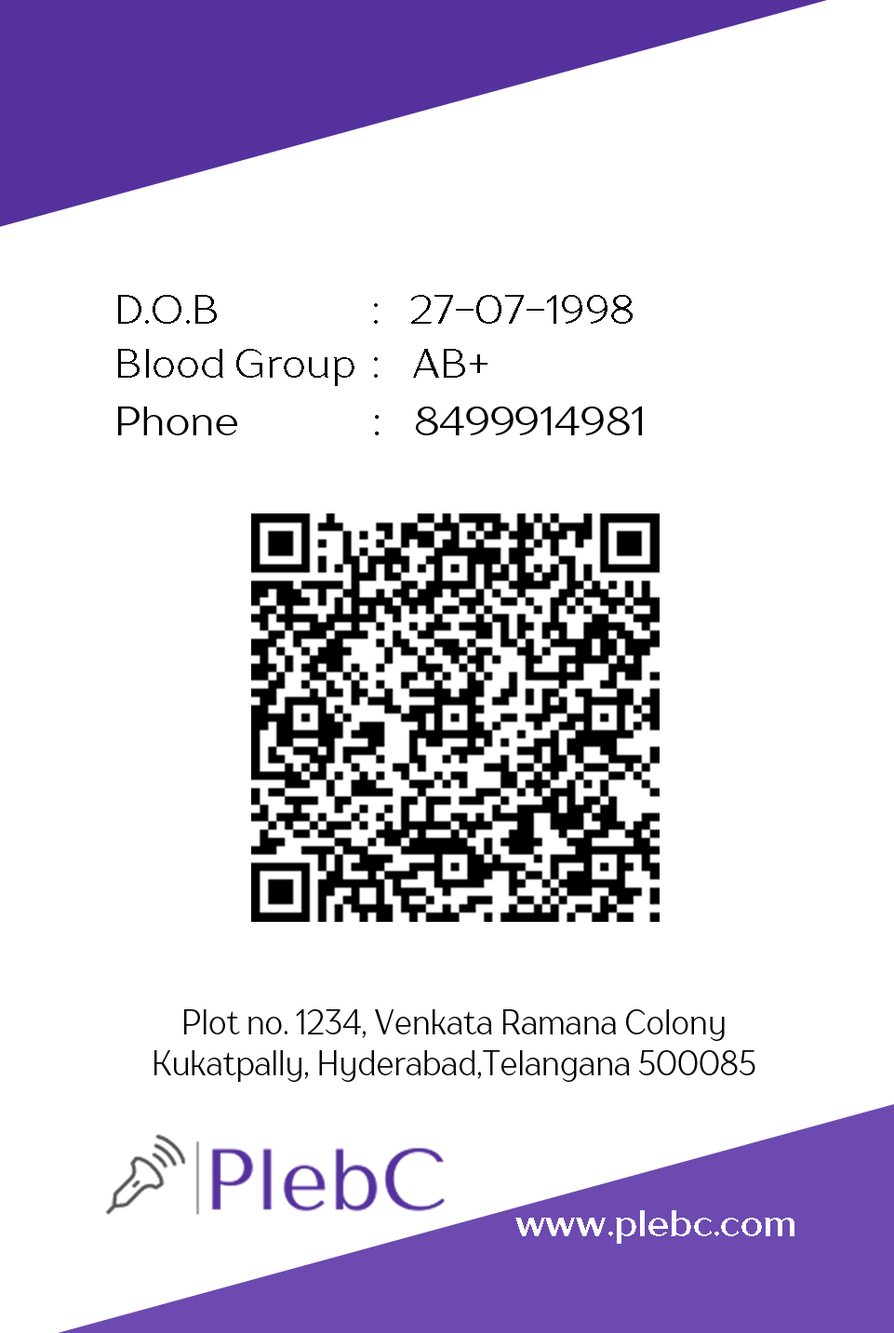
<style>
.page{position:relative;width:894px;height:1333px;background:#ffffff}
.page>*{position:absolute;margin:0}
.t1{font:40.1px "TTDrugsTrial-Regular";color:#010004}
.t2{font:40.1px "TTDrugsTrial-Regular";color:#010002}
.t3{font:40.1px "TTDrugsTrial-Regular";color:#020006}
.t4{font:34.4px "TTDrugsTrial-Regular";color:#020006;scale:0.86 1}
.t5{font:36.2px "TTDrugsTrial-Bold";color:#fefeff}
</style>
<div class="page">
<p class="t1" style="left:118px;top:295px;width:515px;height:29px">D.O.B                :   27-07-1998</p>
<p class="t2" style="left:118px;top:349px;width:370px;height:37px">Blood Group  :   AB+</p>
<p class="t3" style="left:118px;top:407px;width:524px;height:28px">Phone       :   8499914981</p>
<p class="t4" style="left:154px;top:1010px;width:602px;height:72px;text-align:center">Plot no. 1234, Venkata Ramana Colony<br>Kukatpally, Hyderabad,Telangana 500085</p>
<p class="t5" style="left:516px;top:1211px;width:279px;height:33px">www.plebc.com</p>
</div>
